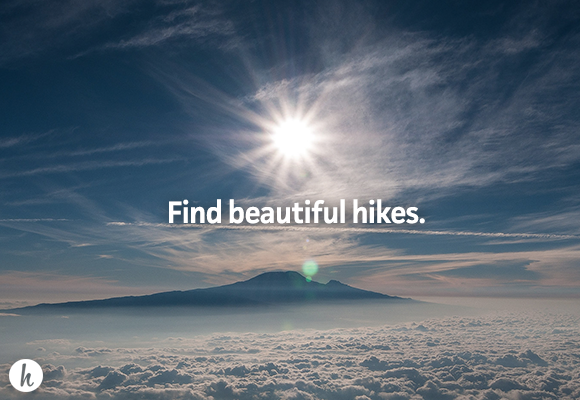
<style>
.page{position:relative;width:580px;height:400px}
.page>*{position:absolute;margin:0}
.t1{font:31px "Facit-Semibold";letter-spacing:-0.03em;color:#ffffff}
</style>
<div class="page">
<p class="t1" style="left:169px;top:199px;width:256px;height:25px">Find beautiful hikes.</p>
</div>
